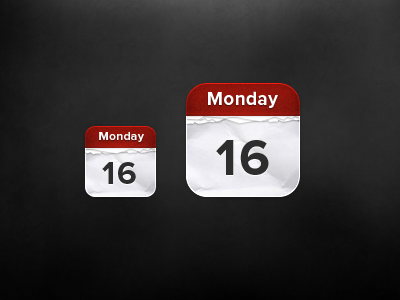
<style>
.page{position:relative;width:400px;height:300px}
.page>*{position:absolute;margin:0}
.t1{font:19px "ProximaNova-Bold";letter-spacing:0.02em;color:#ffffff}
.t2{font:12px "ProximaNova-Bold";letter-spacing:0.02em;color:#ffffff}
.t3{font:51px "ProximaNova-Bold";letter-spacing:0.05em;color:#2d2d2d}
.t4{font:32px "ProximaNova-Bold";letter-spacing:0.05em;color:#2d2d2d}
</style>
<div class="page">
<p class="t1" style="left:208px;top:91px;width:70px;height:17px">Monday</p>
<p class="t2" style="left:99px;top:132px;width:45px;height:10px">Monday</p>
<p class="t3" style="left:216px;top:140px;width:53px;height:35px">16</p>
<p class="t4" style="left:102px;top:162px;width:34px;height:22px">16</p>
</div>
